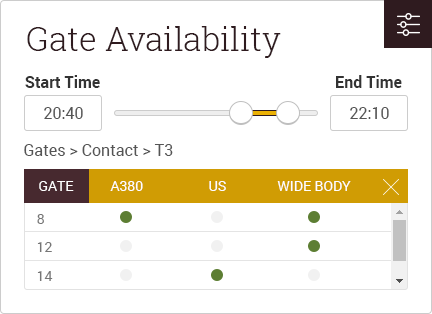
<style>
.page{position:relative;width:432px;height:314px;background:#ffffff}
.page>*{position:absolute;margin:0}
.t1{font:33px "RobotoSlab-Light";color:#2f1b1f}
.t2{font:16px "Roboto-Bold";color:#333333}
.t3{font:16px "Roboto-Regular";color:#555555}
.t4{font:14px "Roboto-Regular";color:#ffffff;text-transform:uppercase}
.t5{font:14px "Roboto-Regular";color:#767676}
</style>
<div class="page">
<p class="t1" style="left:27px;top:26px;width:254px;height:32px">Gate Availability</p>
<p class="t2" style="left:25px;top:75px;width:75px;height:13px">Start Time</p>
<p class="t2" style="left:336px;top:75px;width:66px;height:13px">End Time</p>
<p class="t3" style="left:44px;top:107px;width:39px;height:12px">20:40</p>
<p class="t3" style="left:350px;top:107px;width:39px;height:12px">22:10</p>
<p class="t3" style="left:24px;top:144px;width:149px;height:12px">Gates &gt; Contact &gt; T3</p>
<p class="t4" style="left:39px;top:181px;width:35px;height:10px">Gate</p>
<p class="t4" style="left:110px;top:181px;width:33px;height:10px">A380</p>
<p class="t4" style="left:209px;top:181px;width:17px;height:10px">US</p>
<p class="t4" style="left:277px;top:181px;width:74px;height:10px">Wide Body</p>
<p class="t5" style="left:37px;top:214px;width:7px;height:10px">8</p>
<p class="t5" style="left:37px;top:242px;width:15px;height:10px">12</p>
<p class="t5" style="left:37px;top:271px;width:16px;height:10px">14</p>
</div>
